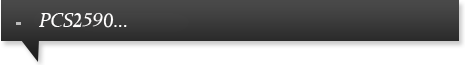
<style>
.page{position:relative;width:465px;height:65px;background:#ffffff}
.page>*{position:absolute;margin:0}
.t1{font:20px "Constantia-Italic";letter-spacing:-0.01em;color:#fffefe}
.t2{font:30px "Constantia-Italic";letter-spacing:0.05em;color:#fffefe;scale:0.67 1}
.t3{font:19.6px "Constantia-Italic";color:#fffefe}
.t4{font:19.6px "Constantia-Italic";letter-spacing:-0.01em;color:#fffefe}
.t5{font:29.4px "Constantia-Italic";letter-spacing:-0.01em;color:#fffefe;scale:0.68 1}
</style>
<div class="page">
<p class="t1" style="left:39px;top:12px;width:88px;height:16px">PCS<span class="t2">2</span><span class="t3">5</span><span class="t4">9</span><span class="t5">0</span>...</p>
</div>
